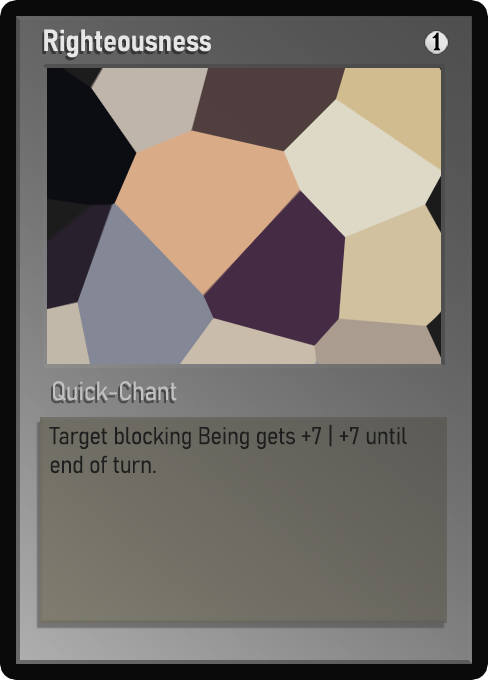
<style>
.page{position:relative;width:488px;height:680px}
.page>*{position:absolute;margin:0}
.t1{font:30px "Bahnschrift-SemiBoldSemiCondensed";color:#f2f2f2;font-weight:bold}
.t2{font:25px "WTRRoycroft";color:#000000;font-weight:bold;scale:1.09 1}
.t3{font:26px "Bahnschrift-LightSemiCondensed";color:#c8c8c8;font-weight:bold}
.t4{font:24px "Bahnschrift-LightSemiCondensed";color:#1e1e1e;font-weight:bold}
</style>
<div class="page">
<p class="t1" style="left:44px;top:29px;width:167px;height:29px;opacity:0.9">Righteousness</p>
<p class="t2" style="left:432px;top:32px;width:9px;height:19px">1</p>
<p class="t3" style="left:53px;top:381px;width:124px;height:20px;opacity:0.9">Quick-Chant</p>
<p class="t4" style="left:49px;top:424px;width:358px;height:50px">Target blocking Being gets +7 | +7 until end of turn.</p>
</div>
